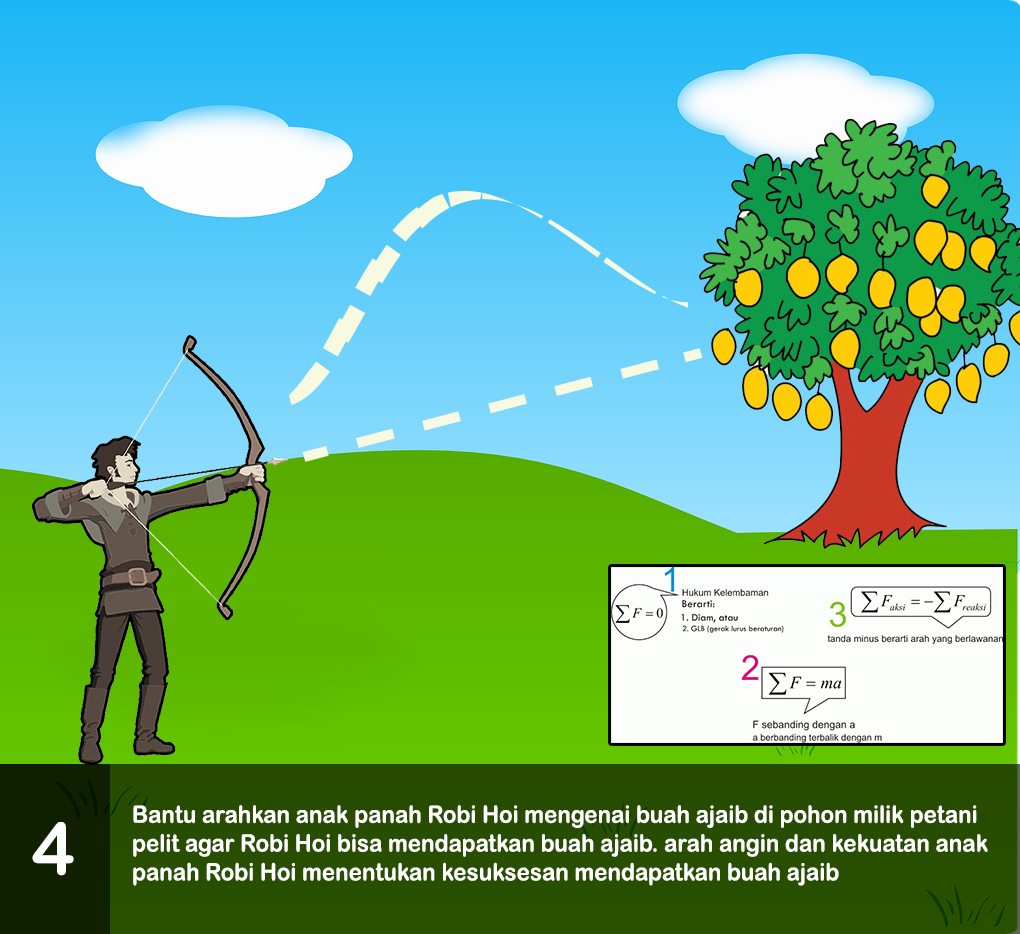
<style>
.page{position:relative;width:1020px;height:934px}
.page>*{position:absolute;margin:0}
.t1{font:24px "ArialRoundedMTBold";color:#ffffff;scale:0.93 1}
.t2{font:72px "ArialRoundedMTBold";color:#ffffff}
</style>
<div class="page">
<p class="t1" style="left:133px;top:805px;width:855px;height:81px">Bantu arahkan anak panah Robi Hoi mengenai buah ajaib di pohon milik petani pelit agar Robi Hoi bisa mendapatkan buah ajaib. arah angin dan kekuatan anak panah Robi Hoi menentukan kesuksesan mendapatkan buah ajaib</p>
<p class="t2" style="left:32px;top:822px;width:42px;height:54px">4</p>
</div>
